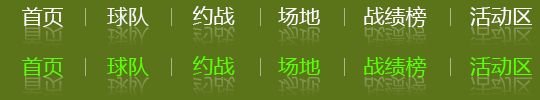
<style>
.page{position:relative;width:540px;height:100px;background:#5b7319}
.page>*{position:absolute;margin:0}
.t1{font:21px "MicrosoftYaHei";color:#ffffff;text-transform:uppercase}
.t2{font:21px "MicrosoftYaHei";color:#f1f3ef;text-transform:uppercase}
.t3{font:21px "MicrosoftYaHei";color:#57ff05;text-transform:uppercase}
</style>
<div class="page">
<p class="t1" style="left:22px;top:6px;width:510px;height:21px">首页       <span class="t2">球队</span>       约战       场地       战绩榜       活动区</p>
<p class="t3" style="left:22px;top:56px;width:510px;height:21px">首页       球队       约战       场地       战绩榜       活动区</p>
</div>
